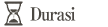
<style>
.page{position:relative;width:108px;height:27px;background:#ffffff}
.page>*{position:absolute;margin:0}
.t1{font:18px "RyuminPro-ExBold";letter-spacing:-0.08em;color:#4c4843;scale:0.9 1}
</style>
<div class="page">
<p class="t1" style="left:30px;top:7px;width:46px;height:14px">Durasi</p>
</div>
